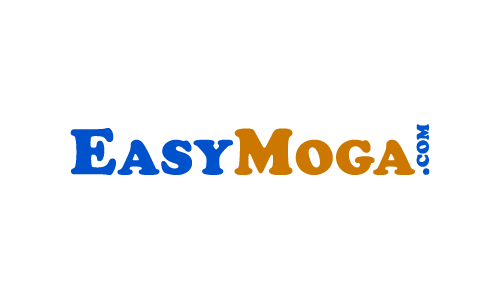
<style>
.page{position:relative;width:500px;height:300px;background:#ffffff}
.page>*{position:absolute;margin:0}
.t1{font:25px "CooperBlack";color:#0055cc;font-variant:small-caps;font-weight:bold}
.t2{font:50px "CooperBlack";color:#0052cc;font-weight:bold}
.t3{font:66.7px "CooperBlack";color:#0052cc;font-weight:bold}
.t4{font:66.7px "CooperBlack";color:#cc7700;font-weight:bold}
.t5{font:50px "CooperBlack";color:#cc7700;font-weight:bold}
</style>
<div class="page">
<p class="t1" style="left:416px;top:124px;width:14px;height:51px;rotate:-90deg">.com</p>
<p class="t2" style="left:70px;top:128px;width:345px;height:47px"><span class="t3">E</span>ASY<span class="t4">M</span><span class="t5">OGA</span></p>
</div>
